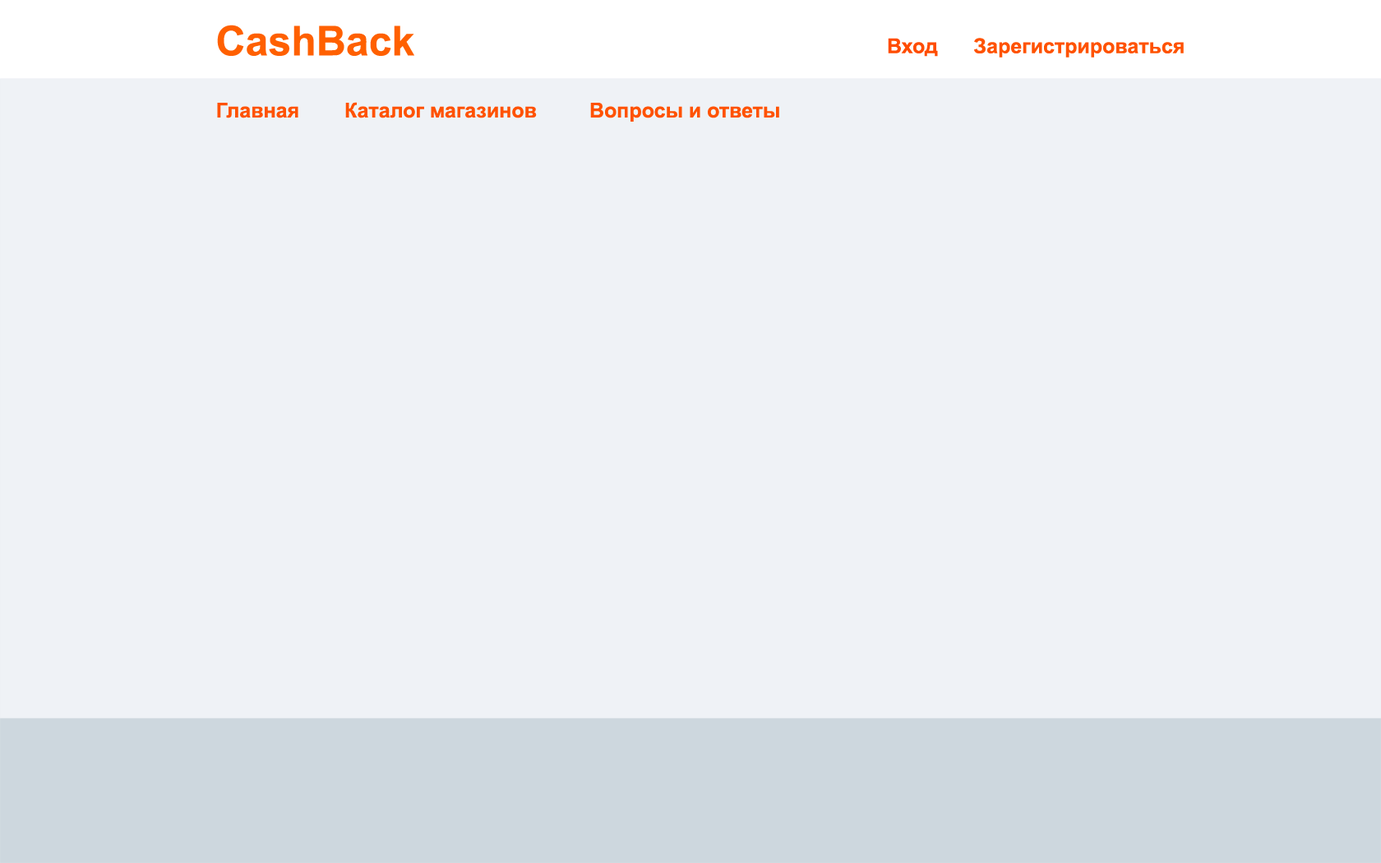
<style>
.page{position:relative;width:1381px;height:863px;background:#eff2f6}
.page>*{position:absolute;margin:0}
.t1{font:41.1px "Arial-BoldMT";color:#ff6000}
.t2{font:20.6px "Arial-BoldMT";color:#ff4c00}
.t3{font:20.6px "Arial-BoldMT";color:#ff5200}
</style>
<div class="page">
<p class="t1" style="left:217px;top:25px;width:197px;height:31px">CashBack</p>
<p class="t2" style="left:888px;top:38px;width:50px;height:19px">Вход</p>
<p class="t3" style="left:974px;top:38px;width:210px;height:20px">Зарегистрироваться</p>
<p class="t3" style="left:345px;top:102px;width:192px;height:16px">Каталог магазинов</p>
<p class="t3" style="left:217px;top:103px;width:81px;height:15px">Главная</p>
<p class="t3" style="left:590px;top:103px;width:189px;height:19px">Вопросы и ответы</p>
</div>
